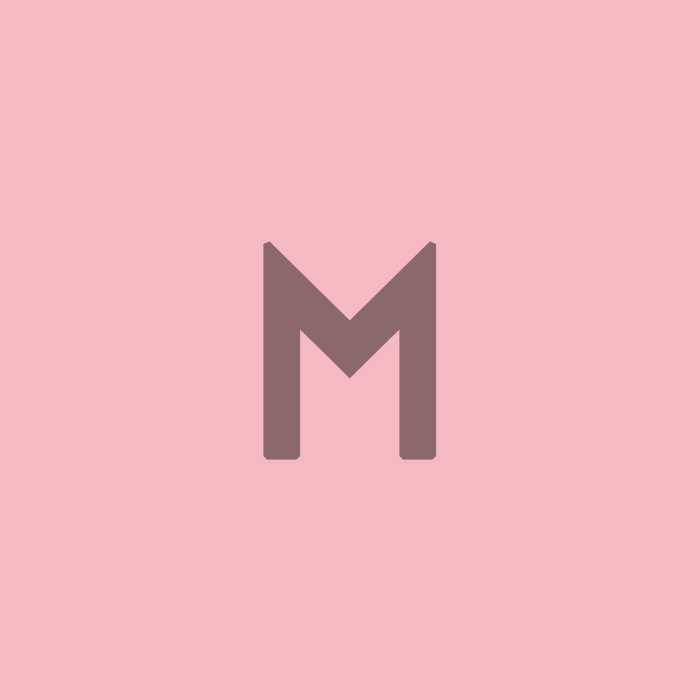
<style>
.page{position:relative;width:700px;height:700px;background:#f4b9c2}
.page>*{position:absolute;margin:0}
.t1{font:303.1px "AzonixRegular";color:#8b686d;font-weight:bold;scale:0.78 1}
</style>
<div class="page">
<p class="t1" style="left:263px;top:241px;width:174px;height:219px">M</p>
</div>
